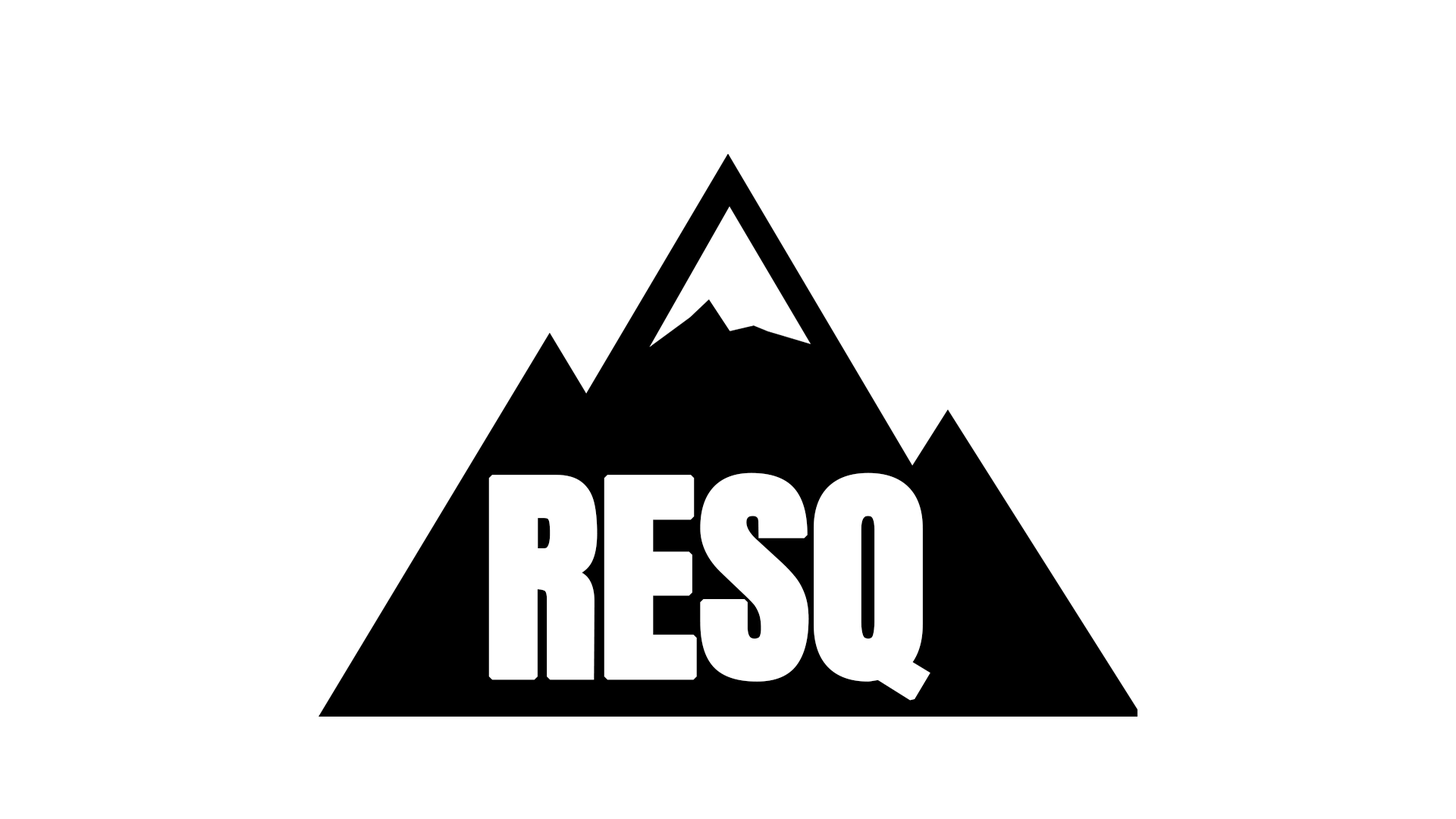
<style>
.page{position:relative;width:1456px;height:819px;background:#ffffff}
.page>*{position:absolute;margin:0}
.t1{font:230.9px "Anton-Regular";letter-spacing:-0.025em;color:#ffffff;font-weight:bold;scale:1.05 1}
</style>
<div class="page">
<p class="t1" style="left:488px;top:472px;width:442px;height:229px">RESQ</p>
</div>
